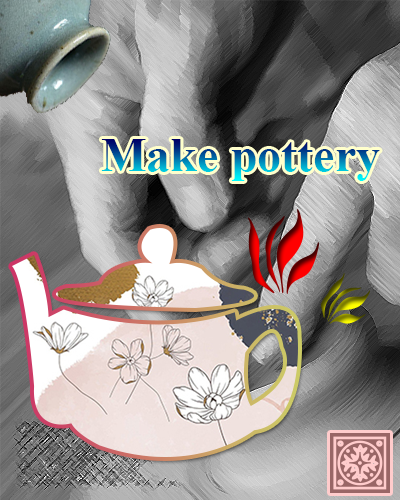
<style>
.page{position:relative;width:400px;height:500px}
.page>*{position:absolute;margin:0}
.t1{font:48.3px "TimesNewRomanPS-BoldMT"}
</style>
<div class="page">
<p class="t1" style="left:101px;top:139px;width:279px;height:42px">Make pottery</p>
</div>
